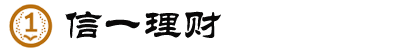
<style>
.page{position:relative;width:400px;height:50px;background:#ffffff}
.page>*{position:absolute;margin:0}
.t1{font:40px "STLiti";color:#090808}
</style>
<div class="page">
<p class="t1" style="left:65px;top:11px;width:156px;height:28px">信一理财</p>
</div>
